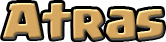
<style>
.page{position:relative;width:166px;height:42px;background:#d5a760}
.page>*{position:absolute;margin:0}
.t1{font:38px "Supercell-Magic";color:#ffffff}
</style>
<div class="page">
<p class="t1" style="left:3px;top:3px;width:160px;height:36px">Atras</p>
</div>
